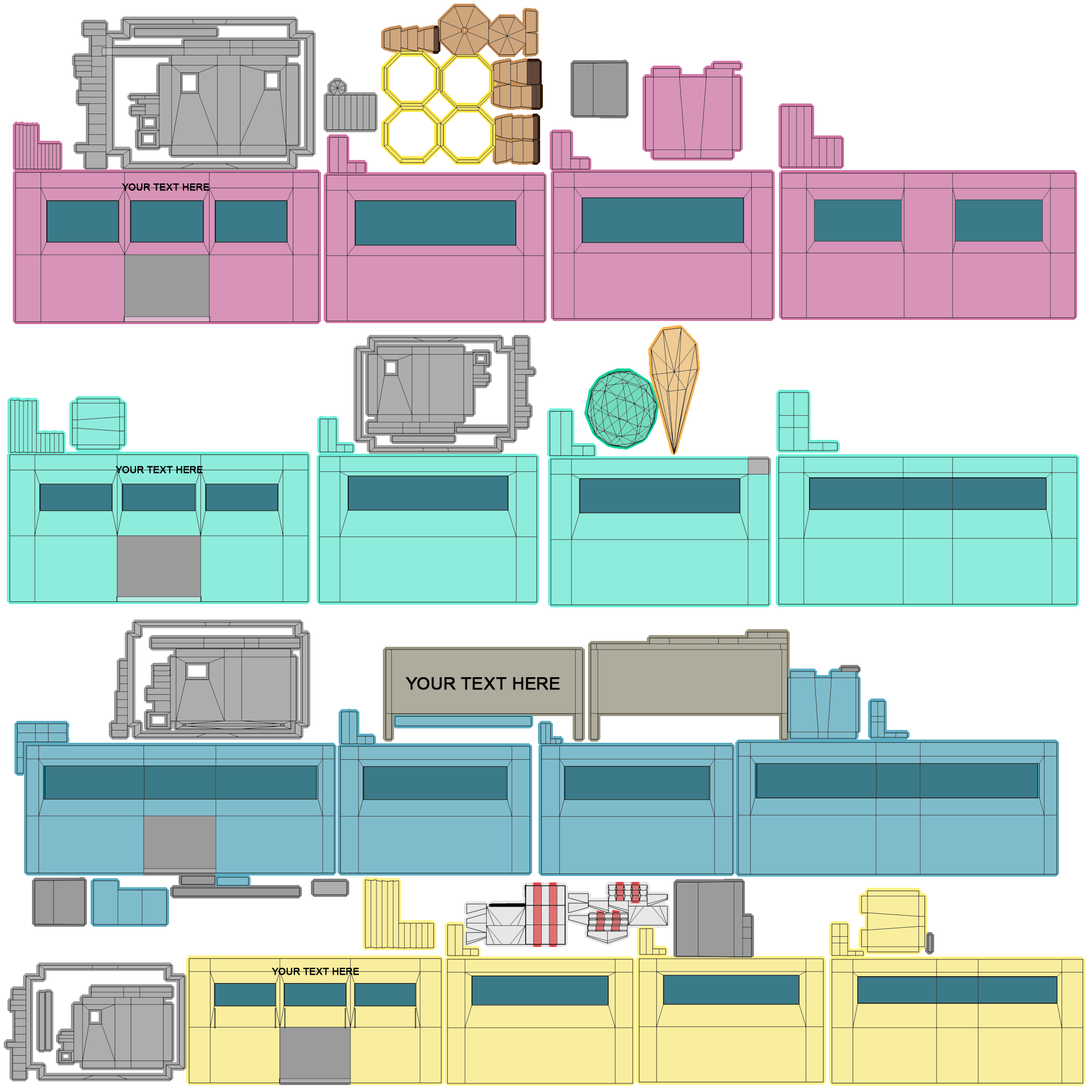
<style>
.page{position:relative;width:1092px;height:1092px;background:#ffffff}
.page>*{position:absolute;margin:0}
.t1{font:9.6px "ArialMT";color:#010101;font-weight:bold}
.t2{font:17.1px "ArialMT";color:#010101;font-weight:bold}
</style>
<div class="page">
<p class="t1" style="left:122px;top:183px;width:88px;height:8px">YOUR TEXT HERE</p>
<p class="t1" style="left:116px;top:466px;width:87px;height:7px">YOUR TEXT HERE</p>
<p class="t2" style="left:406px;top:677px;width:154px;height:13px">YOUR TEXT HERE</p>
<p class="t1" style="left:272px;top:968px;width:87px;height:7px">YOUR TEXT HERE</p>
</div>
